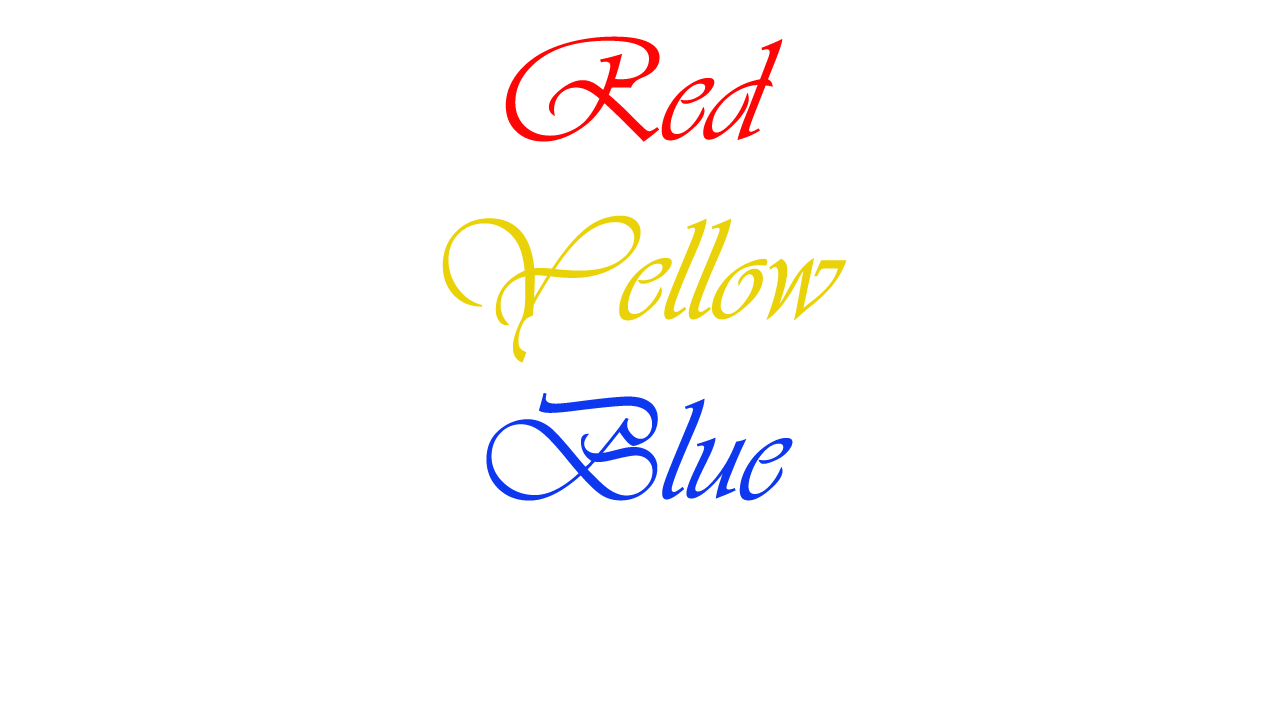
<style>
.page{position:relative;width:1280px;height:720px;background:#ffffff}
.page>*{position:absolute;margin:0}
.t1{font:150px "Vivaldii";color:#ead209}
.t2{font:150px "Vivaldii";color:#fe0606}
.t3{font:150px "Vivaldii";color:#0d38f0}
.t4{font:200px "Vivaldii";color:#000000}
</style>
<div class="page">
<p class="t1" style="left:442px;top:36px;width:405px;height:465px;text-align:center"><span class="t2">Red<br></span>Yellow<br><span class="t3">Blue<br></span><span class="t4"><br>Blue</span></p>
</div>
